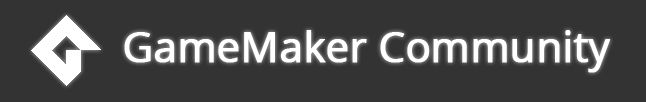
<style>
.page{position:relative;width:646px;height:102px;background:#333333}
.page>*{position:absolute;margin:0}
.t1{font:42.2px "OpenSans-Regular";letter-spacing:-0.02em;color:#ffffff;font-weight:bold}
</style>
<div class="page">
<p class="t1" style="left:124px;top:30px;width:487px;height:43px">GameMaker Community</p>
</div>
